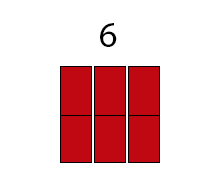
<style>
.page{position:relative;width:220px;height:180px;background:#ffffff}
.page>*{position:absolute;margin:0}
.t1{font:36px "MyriadPro-Regular";color:#000000}
</style>
<div class="page">
<p class="t1" style="left:100px;top:23px;width:17px;height:24px">6v</p>
</div>
